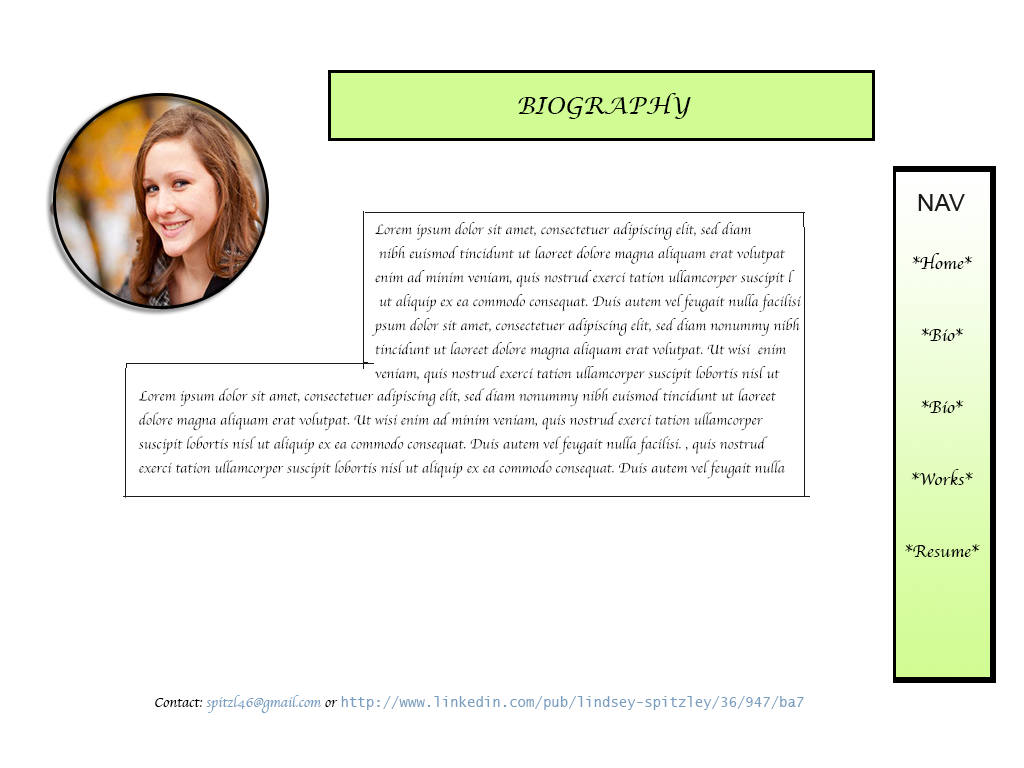
<style>
.page{position:relative;width:1024px;height:768px;background:#ffffff}
.page>*{position:absolute;margin:0}
.t1{font:24px "LucidaCalligraphy-Italic";color:#000000;text-transform:uppercase}
.t2{font:14px/24px "Apple-Chancery";color:#000000}
.t3{font:18px/24px "Apple-Chancery";color:#000000}
.t4{font:14px "LucidaSans-Typewriter";color:#779dc1}
.t5{font:24px "Apple-Chancery";color:#000000}
.t6{font:14px "Apple-Chancery";color:#000000}
.t7{font:14px "Apple-Chancery";color:#779dc1}
</style>
<div class="page">
<p class="t1" style="left:518px;top:93px;width:173px;height:26px">BIOGRAPHY</p>
<p class="t2" style="left:371px;top:222px;width:430px;height:162px">Lorem ipsum dolor sit amet, consectetuer adipiscing elit, sed diam <br> nibh euismod tincidunt ut laoreet dolore magna aliquam erat volutpat<br>enim ad minim veniam, quis nostrud exerci tation ullamcorper suscipit l<br> ut aliquip ex ea commodo consequat. Duis autem vel feugait nulla facilisi<br>psum dolor sit amet, consectetuer adipiscing elit, sed diam nonummy nibh <br>tincidunt ut laoreet dolore magna aliquam erat volutpat. Ut wisi  enim <br>veniam, quis nostrud exerci tation ullamcorper suscipit lobortis nisl ut</p>
<p class="t3" style="left:905px;top:253px;width:75px;height:304px;text-align:center">*Home*<br><br><br>*Bio*<br><br><br>*Bio*<br><br><br>*Works*<br><br><br>*Resume*</p>
<p class="t2" style="left:138px;top:388px;width:647px;height:91px">Lorem ipsum dolor sit amet, consectetuer adipiscing elit, sed diam nonummy nibh euismod tincidunt ut laoreet dolore magna aliquam erat volutpat. Ut wisi enim ad minim veniam, quis nostrud exerci tation ullamcorper suscipit lobortis nisl ut aliquip ex ea commodo consequat. Duis autem vel feugait nulla facilisi. , quis nostrud exerci tation ullamcorper suscipit lobortis nisl ut aliquip ex ea commodo consequat. Duis autem vel feugait nulla facilisi.</p>
<p class="t4" style="left:155px;top:695px;width:649px;height:18px"><span class="t5"><br></span><span class="t6">      Contact: </span><span class="t7">spitzl46@gmail.com</span><span class="t6"> or </span>http://www.linkedin.com/pub/lindsey-spitzley/36/947/ba7</p>
</div>
